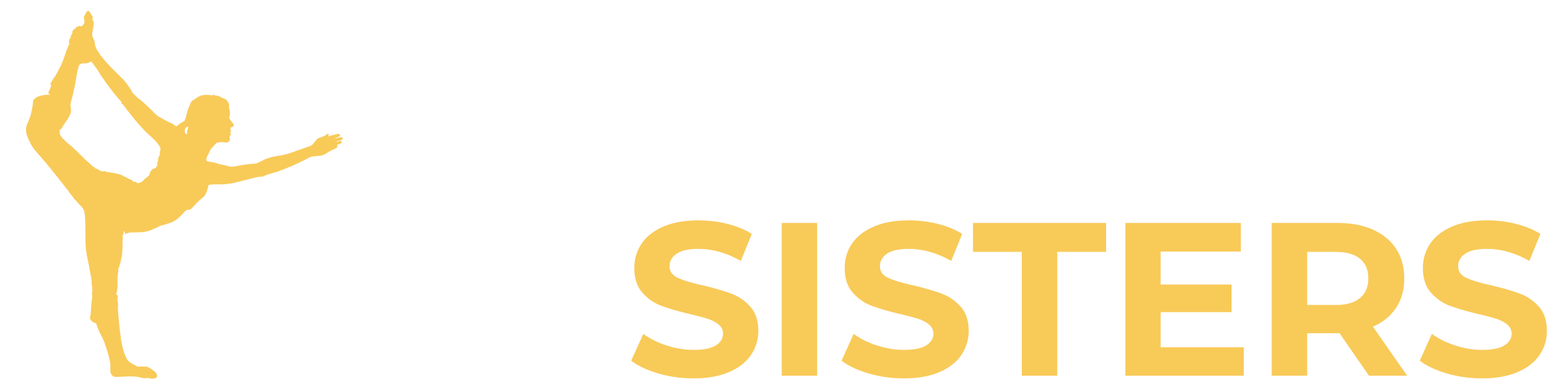
<style>
.page{position:relative;width:1568px;height:392px;background:#ffffff}
.page>*{position:absolute;margin:0}
.t1{font:218px "Montserrat-Bold";color:#f8ca58;text-transform:uppercase}
.t2{font:218px "Montserrat-Bold";color:#ffffff;text-transform:uppercase}
</style>
<div class="page">
<p class="t1" style="left:177px;top:220px;width:1370px;height:159px"><span class="t2">Sol</span>Sisters</p>
</div>
